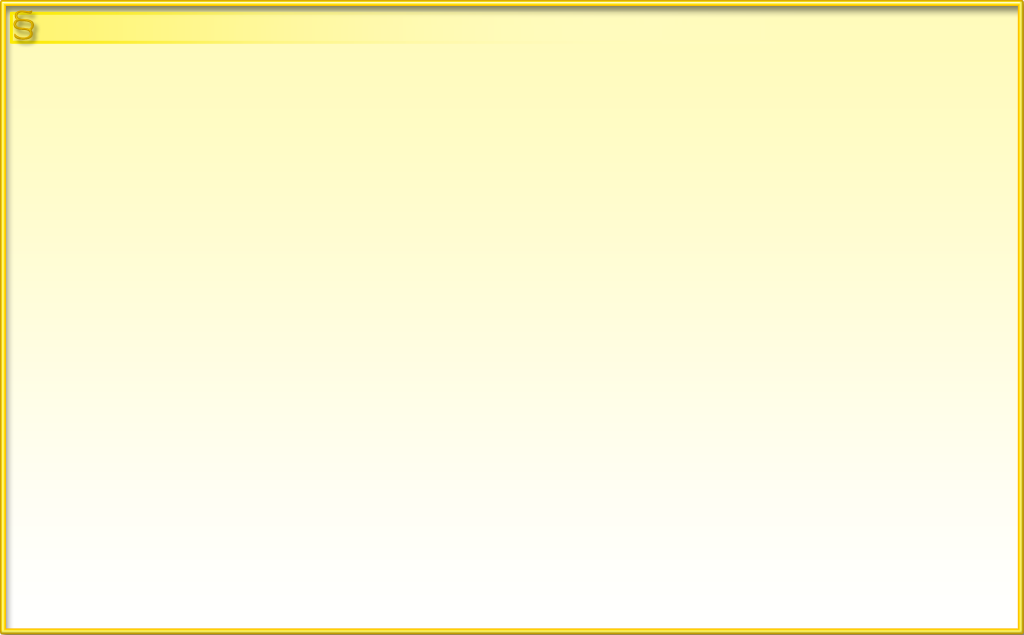
<style>
.page{position:relative;width:1024px;height:635px}
.page>*{position:absolute;margin:0}
.t1{font:38.4px "FZSTK--GBK1-0";letter-spacing:-0.14em;color:#d1a900;font-weight:bold}
</style>
<div class="page">
<p class="t1" style="left:13px;top:10px;width:21px;height:30px">§</p>
</div>
